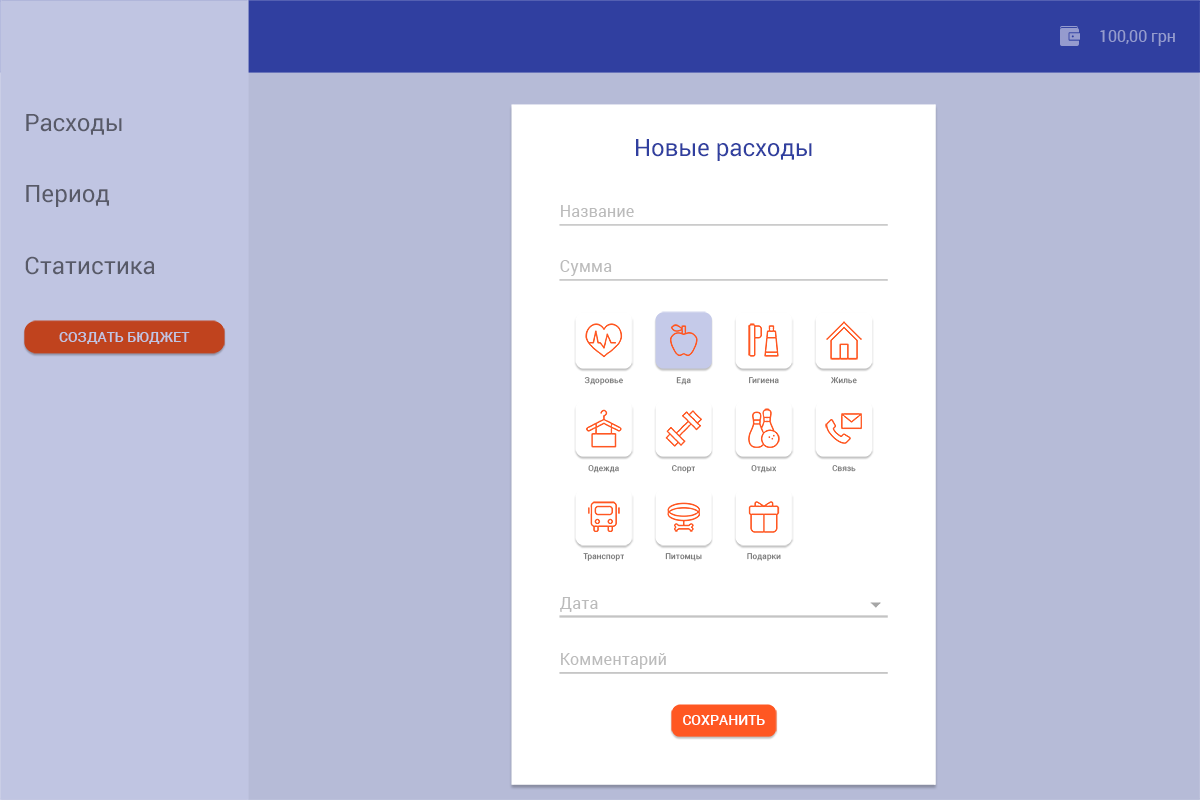
<style>
.page{position:relative;width:1200px;height:800px;background:#b6bbd7}
.page>*{position:absolute;margin:0}
.t1{font:16px "Roboto-Regular";color:#959cce}
.t2{font:24px "Roboto-Regular";color:#585a68}
.t3{font:24px "Roboto-Regular";color:#303f9f}
.t4{font:16px "Roboto-Regular";letter-spacing:0.01em;color:#bbbbbb}
.t5{font:14px "Roboto-Medium";letter-spacing:0.005em;color:#c0c5e2;text-transform:uppercase}
.t6{font:8px "Roboto-Regular";color:#757575}
.t7{font:14px "Roboto-Medium";letter-spacing:0.005em;color:#ffffff;text-transform:uppercase}
</style>
<div class="page">
<p class="t1" style="left:1100px;top:30px;width:75px;height:16px">100,00 грн</p>
<p class="t2" style="left:26px;top:114px;width:96px;height:21px">Расходы</p>
<p class="t3" style="left:636px;top:139px;width:176px;height:22px">Новые расходы</p>
<p class="t2" style="left:26px;top:185px;width:84px;height:22px">Период</p>
<p class="t4" style="left:561px;top:205px;width:73px;height:12px">Название</p>
<p class="t2" style="left:25px;top:256px;width:130px;height:19px">Статистика</p>
<p class="t4" style="left:560px;top:260px;width:52px;height:16px">Сумма</p>
<p class="t5" style="left:59px;top:332px;width:131px;height:12px">создать бюджет</p>
<p class="t6" style="left:584px;top:377px;width:39px;height:8px">Здоровье</p>
<p class="t6" style="left:676px;top:377px;width:15px;height:8px">Еда</p>
<p class="t6" style="left:749px;top:377px;width:30px;height:7px">Гигиена</p>
<p class="t6" style="left:831px;top:377px;width:26px;height:7px">Жилье</p>
<p class="t6" style="left:588px;top:465px;width:31px;height:8px">Одежда</p>
<p class="t6" style="left:672px;top:465px;width:23px;height:8px">Спорт</p>
<p class="t6" style="left:751px;top:465px;width:25px;height:8px">Отдых</p>
<p class="t6" style="left:832px;top:465px;width:24px;height:7px">Связь</p>
<p class="t6" style="left:583px;top:553px;width:41px;height:8px">Транспорт</p>
<p class="t6" style="left:665px;top:553px;width:37px;height:8px">Питомцы</p>
<p class="t6" style="left:747px;top:553px;width:34px;height:8px">Подарки</p>
<p class="t4" style="left:560px;top:597px;width:38px;height:15px">Дата</p>
<p class="t4" style="left:561px;top:653px;width:105px;height:16px">Комментарий</p>
<p class="t7" style="left:683px;top:715px;width:82px;height:10px">сохранить</p>
</div>
